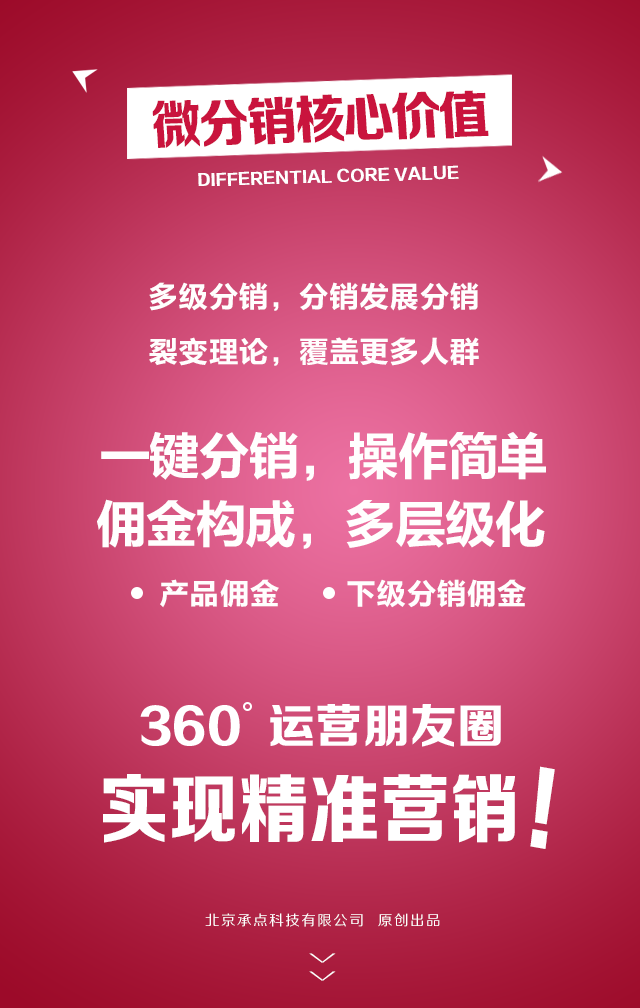
<style>
.page{position:relative;width:640px;height:1008px}
.page>*{position:absolute;margin:0}
.t1{font:52.3px "FZZDHJW--GB1-0";letter-spacing:-0.05em;color:#c9143d;text-transform:uppercase;scale:0.97 1}
.t2{font:15.6px "FZZDHJW--GB1-0";letter-spacing:0.005em;color:#ffffff;text-transform:uppercase}
.t3{font:30px "FZLTCHK--GBK1-0";color:#fffefe;text-transform:uppercase}
.t4{font:52.1px "FZLTCHK--GBK1-0";letter-spacing:-0.05em;color:#fffefe;text-transform:uppercase}
.t5{font:75.3px "FZZDHJW--GB1-0";letter-spacing:0.005em;color:#ffffff;text-transform:uppercase;scale:0.93 1}
.t6{font:95.1px "FZZDHJW--GB1-0";letter-spacing:0.005em;color:#ffffff;text-transform:uppercase;scale:0.84 1}
.t7{font:14.2px "FZZHJW--GB1-0";letter-spacing:0.1em;color:#ffffff;text-transform:uppercase}
.t8{font:36.8px "FZZXHJW--GB1-0";letter-spacing:0.5em;color:#ffffff;text-transform:uppercase;scale:0.44 1}
</style>
<div class="page">
<p class="t1" style="left:152px;top:90px;width:337px;height:58px;rotate:-2deg">微分销核心价值</p>
<p class="t2" style="left:198px;top:165px;width:261px;height:21px;rotate:-2deg">Differential core value</p>
<p class="t3" style="left:149px;top:282px;width:330px;height:29px">多级分销，分销发展分销</p>
<p class="t3" style="left:149px;top:337px;width:330px;height:29px">裂变理论，覆盖更多人群</p>
<p class="t4" style="left:101px;top:431px;width:445px;height:50px">一键分销，操作简单</p>
<p class="t4" style="left:97px;top:499px;width:448px;height:50px">佣金构成，多层级化</p>
<p class="t3" style="left:160px;top:579px;width:119px;height:29px">产品佣金</p>
<p class="t3" style="left:347px;top:579px;width:179px;height:29px">下级分销佣金</p>
<p class="t5" style="left:103px;top:774px;width:412px;height:69px">实现精准营销</p>
<p class="t6" style="left:530px;top:766px;width:25px;height:83px;rotate:10deg">!</p>
<p class="t7" style="left:205px;top:913px;width:235px;height:14px">北京承点科技有限公司  原创出品</p>
<p class="t8" style="left:309px;top:953px;width:27px;height:28px;rotate:90deg">&gt;&gt;</p>
</div>
